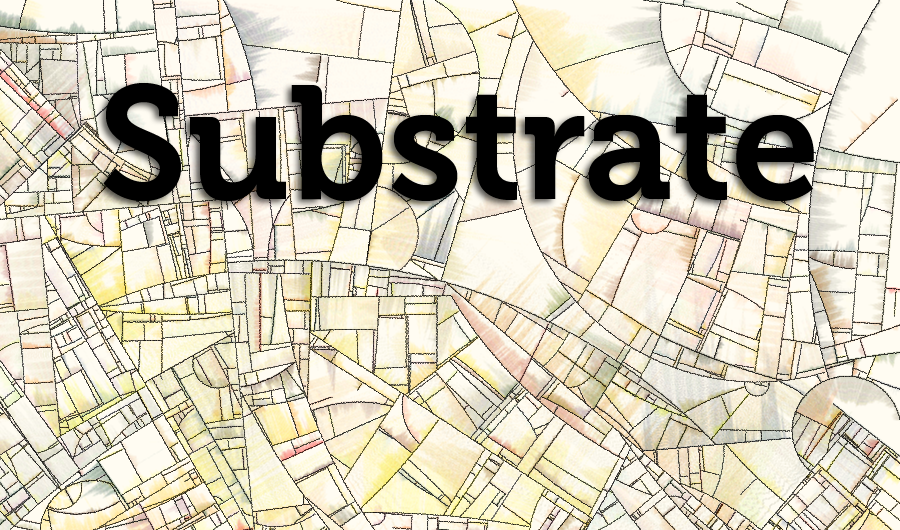
<style>
.page{position:relative;width:900px;height:530px}
.page>*{position:absolute;margin:0}
.t1{font:160px "Museo-700";color:#000000}
</style>
<div class="page">
<p class="t1" style="left:103px;top:83px;width:711px;height:119px">Substrate</p>
</div>
